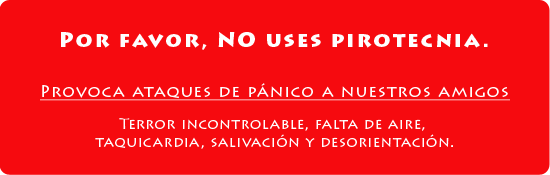
<style>
.page{position:relative;width:550px;height:175px;background:#f60a0f}
.page>*{position:absolute;margin:0}
.t1{font:20.8px "LithosPro-Black";letter-spacing:0.1em;color:#fefefe}
.t2{font:16.7px "LithosPro-Regular";letter-spacing:0.075em;color:#fefefe;text-decoration:underline}
.t3{font:14.6px "LithosPro-Regular";letter-spacing:0.05em;color:#fefefe}
</style>
<div class="page">
<p class="t1" style="left:61px;top:32px;width:427px;height:18px">Por favor, NO uses pirotecnia.</p>
<p class="t2" style="left:40px;top:83px;width:470px;height:18px">Provoca ataques de pánico a nuestros amigos</p>
<p class="t3" style="left:95px;top:118px;width:358px;height:31px;text-align:center">Terror incontrolable, falta de aire, <br>taquicardia, salivación y desorientación.</p>
</div>
